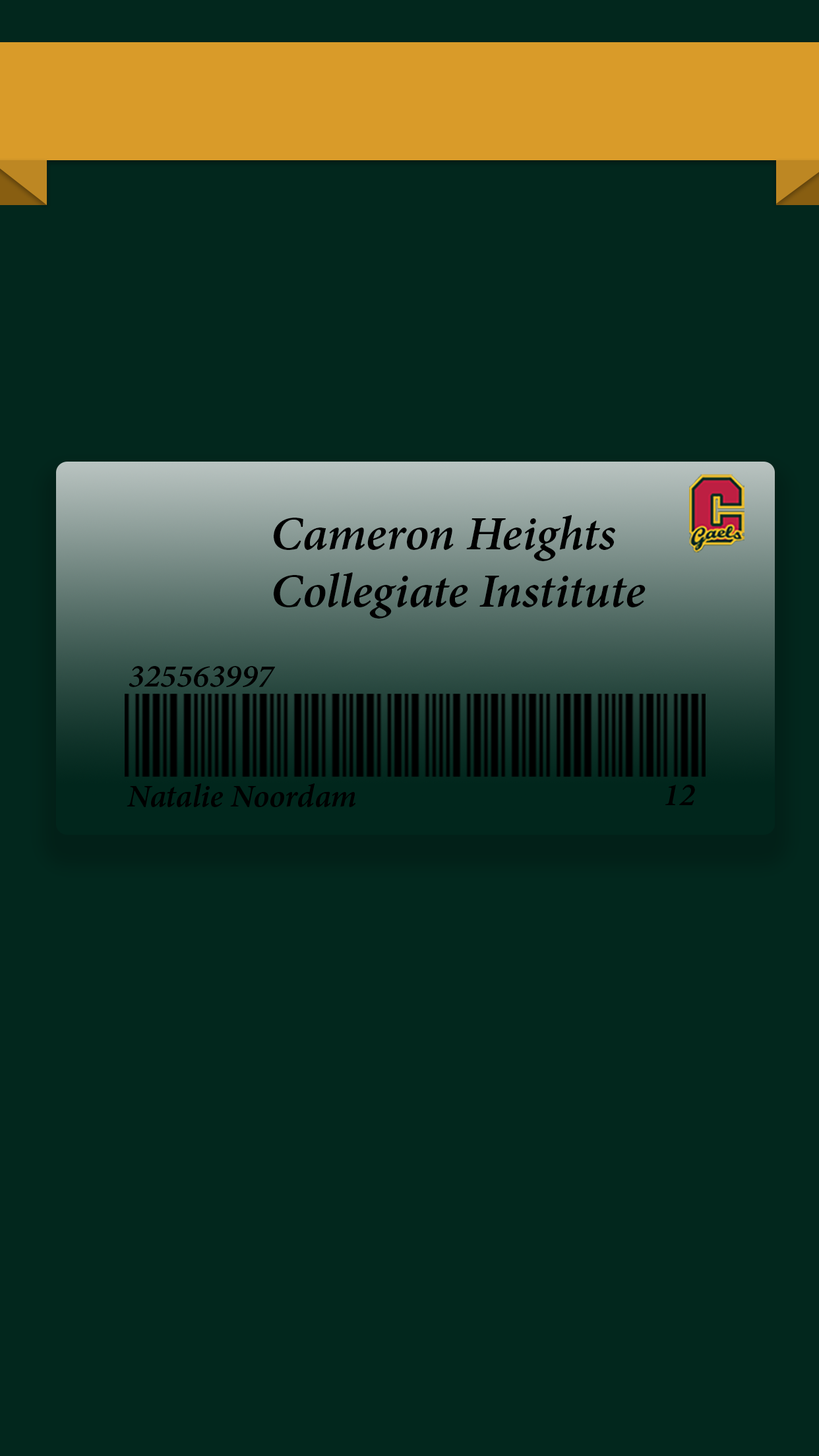
<style>
.page{position:relative;width:819px;height:1456px;background:#02271d}
.page>*{position:absolute;margin:0}
.t1{font:47.9px "MinionPro-SemiboldIt";color:#000000;scale:1.03 1}
.t2{font:32px "MinionPro-SemiboldIt";color:#000000;scale:1.03 1}
.t3{font:31.9px "MinionPro-SemiboldIt";color:#000000;scale:1.03 1}
</style>
<div class="page">
<p class="t1" style="left:274px;top:515px;width:372px;height:104px">Cameron Heights Collegiate Institute</p>
<p class="t2" style="left:129px;top:666px;width:147px;height:21px">325563997</p>
<p class="t3" style="left:127px;top:783px;width:228px;height:24px">Natalie Noordam</p>
<p class="t3" style="left:665px;top:785px;width:30px;height:20px">12</p>
</div>
